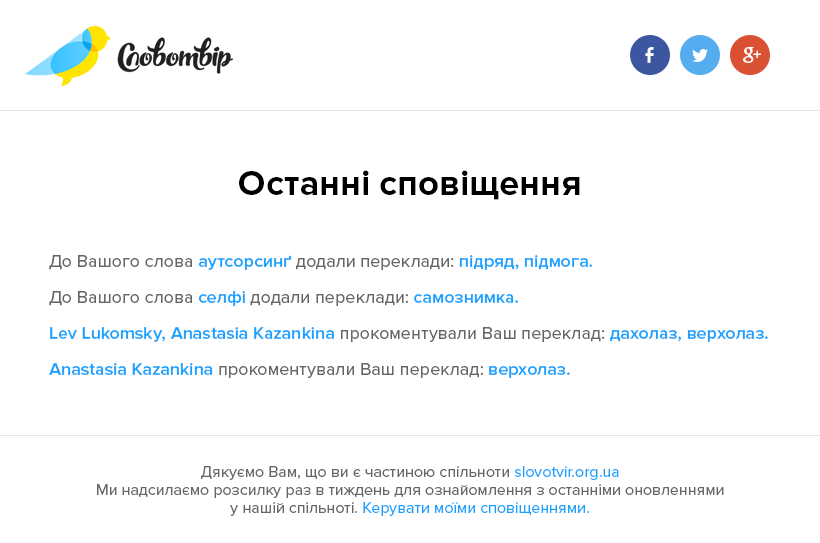
<style>
.page{position:relative;width:820px;height:543px;background:#ffffff}
.page>*{position:absolute;margin:0}
.t1{font:36px "ProximaNova-Bold";color:#000000}
.t2{font:18px/36px "ProximaNova-Semibold";color:#17a2ff}
.t3{font:18px/36px "ProximaNova-Regular";color:#666666}
.t4{font:16px/18px "ProximaNova-Regular";color:#666666}
.t5{font:16px/18px "ProximaNova-Regular";color:#17a2ff}
</style>
<div class="page">
<p class="t1" style="left:239px;top:170px;width:341px;height:30px">Останні сповіщення</p>
<p class="t2" style="left:49px;top:255px;width:719px;height:123px"><span class="t3">До Вашого слова </span>аутсорсинґ<span class="t3"> додали переклади: </span>підряд, підмога.<br><span class="t3">До Вашого слова </span>селфі<span class="t3"> додали переклади: </span>самознимка.<br>Lev Lukomsky, Anastasia Kazankina<span class="t3"> прокоментували Ваш переклад: </span>дахолаз, верхолаз.<br>Anastasia Kazankina<span class="t3"> прокоментували Ваш переклад: </span>верхолаз.</p>
<p class="t4" style="left:97px;top:466px;width:627px;height:50px;text-align:center">Дякуємо Вам, що ви є частиною спільноти <span class="t5">slovotvir.org.ua</span><br>Ми надсилаємо розсилку раз в тиждень для ознайомлення з останніми оновленнями<br>у нашій спільноті. <span class="t5">Керувати моїми сповіщеннями.</span></p>
</div>
